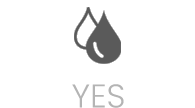
<style>
.page{position:relative;width:195px;height:108px;background:#ffffff}
.page>*{position:absolute;margin:0}
.t1{font:33px "Poppins-Light";color:#b4b4b4}
</style>
<div class="page">
<p class="t1" style="left:72px;top:84px;width:52px;height:24px">YES</p>
</div>
